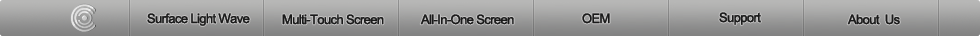
<style>
.page{position:relative;width:980px;height:36px}
.page>*{position:absolute;margin:0}
.t1{font:13px "ArialMT";letter-spacing:-0.075em;color:#1a1a1a;font-weight:bold}
</style>
<div class="page">
<p class="t1" style="left:147px;top:13px;width:103px;height:13px">Surface Light Wave</p>
<p class="t1" style="left:282px;top:14px;width:102px;height:11px">Multi-Touch Screen</p>
<p class="t1" style="left:420px;top:14px;width:94px;height:11px">All-In-One Screen</p>
<p class="t1" style="left:582px;top:13px;width:28px;height:11px">OEM</p>
<p class="t1" style="left:719px;top:12px;width:42px;height:13px">Support</p>
<p class="t1" style="left:847px;top:14px;width:53px;height:11px">About  Us</p>
</div>
